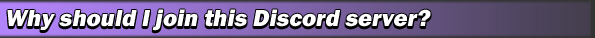
<style>
.page{position:relative;width:595px;height:38px}
.page>*{position:absolute;margin:0}
.t1{font:24px "FranklinGothic-Heavy";color:#ffffff;font-style:italic}
</style>
<div class="page">
<p class="t1" style="left:7px;top:9px;width:424px;height:22px">Why should I join this Discord server?</p>
</div>
